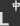
<style>
.page{position:relative;width:20px;height:26px;background:#333333}
.page>*{position:absolute;margin:0}
.t1{font:12px "DFKaiShu-SB-Estd-BF";color:#e1e1e1;font-weight:bold}
.t2{font:18px "ArialMT";color:#e1e1e1;font-weight:bold}
</style>
<div class="page">
<p class="t1" style="left:12px;top:0px;width:9px;height:12px">中</p>
<p class="t2" style="left:0px;top:12px;width:9px;height:14px">L</p>
</div>
